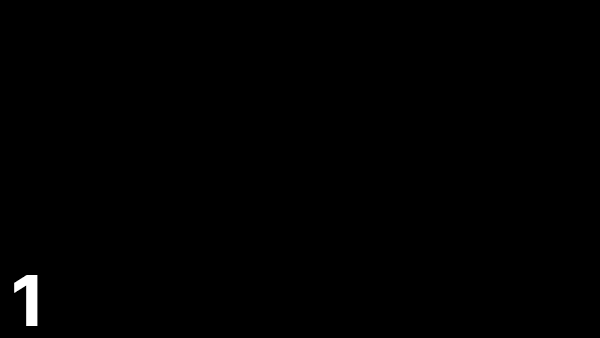
<style>
.page{position:relative;width:600px;height:338px;background:#000000}
.page>*{position:absolute;margin:0}
.t1{font:70px "Inter-Bold";color:#ffffff}
</style>
<div class="page">
<p class="t1" style="left:14px;top:275px;width:24px;height:51px">1</p>
</div>
